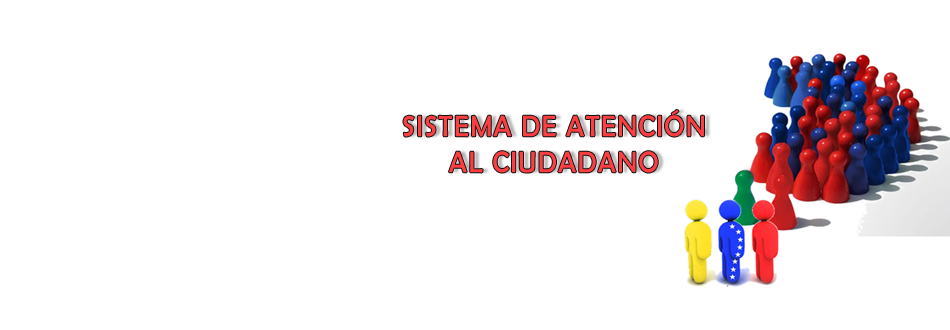
<style>
.page{position:relative;width:950px;height:330px;background:#ffffff}
.page>*{position:absolute;margin:0}
.t1{font:30px "BerlinSansFB-Reg";letter-spacing:0.05em;color:#ff3236;scale:0.92 1}
</style>
<div class="page">
<p class="t1" style="left:403px;top:109px;width:301px;height:64px;text-align:center;opacity:0.94">SISTEMA DE ATENCIÓN <br>AL CIUDADANO</p>
</div>
